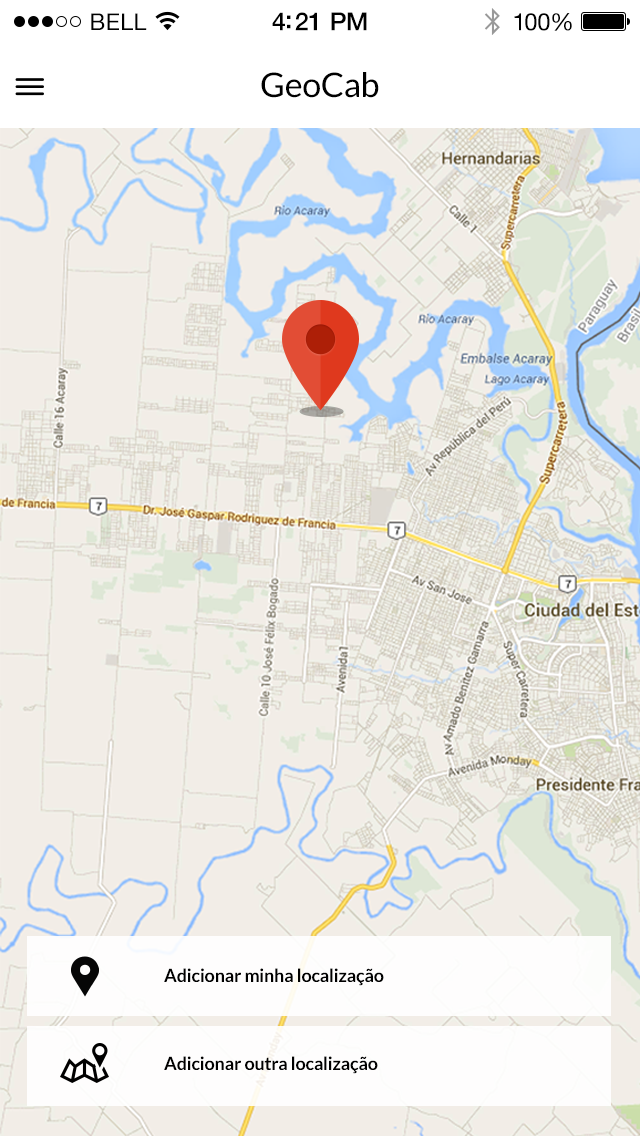
<style>
.page{position:relative;width:640px;height:1136px;background:#f2ede7}
.page>*{position:absolute;margin:0}
.t1{font:23px "HelveticaNeue";letter-spacing:0.02em;color:#000000}
.t2{font:25px "HelveticaNeue-Medium";letter-spacing:-0.02em;color:#000000}
.t3{font:24px "HelveticaNeue";letter-spacing:-0.02em;color:#010101}
.t4{font:34px "Lato-Regular";letter-spacing:-0.01em;color:#000000}
.t5{font:18px "Lato-Bold";letter-spacing:-0.01em;color:#000000}
</style>
<div class="page">
<p class="t1" style="left:91px;top:13px;width:56px;height:17px">BELL</p>
<p class="t2" style="left:272px;top:12px;width:95px;height:19px">4:21 PM</p>
<p class="t3" style="left:514px;top:13px;width:58px;height:18px">100%</p>
<p class="t4" style="left:261px;top:72px;width:118px;height:26px">GeoCab</p>
<p class="t5" style="left:164px;top:968px;width:220px;height:18px">Adicionar minha localização</p>
<p class="t5" style="left:164px;top:1056px;width:214px;height:18px">Adicionar outra localização</p>
</div>
